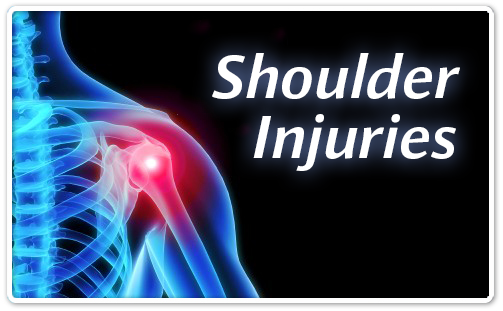
<style>
.page{position:relative;width:503px;height:311px;background:#000000}
.page>*{position:absolute;margin:0}
.t1{font:60px/60px "Impara-MediumItalic";letter-spacing:0.025em;color:#ffffff}
</style>
<div class="page">
<p class="t1" style="left:212px;top:53px;width:248px;height:118px;text-align:right">Shoulder Injuries</p>
</div>
